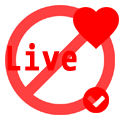
<style>
.page{position:relative;width:120px;height:120px;background:#ffffff}
.page>*{position:absolute;margin:0}
.t1{font:38px "Consolas-Bold";letter-spacing:0.05em;color:#ff0000;font-weight:bold;scale:0.8 1}
</style>
<div class="page">
<p class="t1" style="left:7px;top:43px;width:70px;height:28px">Live</p>
</div>
